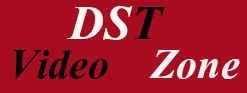
<style>
.page{position:relative;width:247px;height:93px;background:#a80d1f}
.page>*{position:absolute;margin:0}
.t1{font:60px "Aparajita-BoldItalic";color:#fdf8f8}
.t2{font:60px "Aparajita-BoldItalic";color:#00000b}
.t3{font:52px "Aparajita-BoldItalic";color:#00000b}
.t4{font:52px "Aparajita-BoldItalic";color:#fcf4f5}
</style>
<div class="page">
<p class="t1" style="left:67px;top:6px;width:98px;height:34px">DS<span class="t2">T</span></p>
<p class="t3" style="left:14px;top:50px;width:226px;height:29px">Video    <span class="t4">Zone</span></p>
</div>
